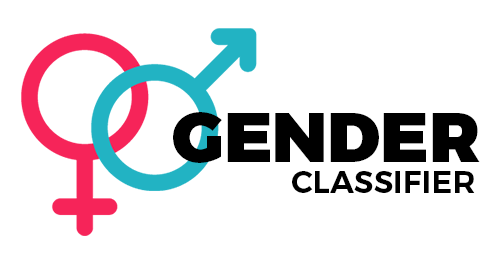
<style>
.page{position:relative;width:500px;height:272px;background:#ffffff}
.page>*{position:absolute;margin:0}
.t1{font:70.3px "Montserrat-Black";color:#000000}
.t2{font:31.2px "Montserrat-SemiBold";color:#000000}
</style>
<div class="page">
<p class="t1" style="left:173px;top:112px;width:307px;height:51px">GENDER</p>
<p class="t2" style="left:292px;top:171px;width:183px;height:22px">CLASSIFIER</p>
</div>
